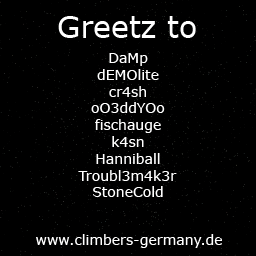
<style>
.page{position:relative;width:256px;height:256px;background:#000000}
.page>*{position:absolute;margin:0}
.t1{font:30px "Verdana";color:#ffffff}
.t2{font:14px "Verdana";color:#ffffff}
</style>
<div class="page">
<p class="t1" style="left:58px;top:16px;width:138px;height:22px">Greetz to</p>
<p class="t2" style="left:78px;top:53px;width:99px;height:144px;text-align:center">DaMp<br>dEMOlite<br>cr4sh<br>oO3ddYOo<br>fischauge<br>k4sn<br>Hanniball<br>Troubl3m4k3r<br>StoneCold</p>
<p class="t2" style="left:36px;top:234px;width:186px;height:14px">www.climbers-germany.de</p>
</div>
